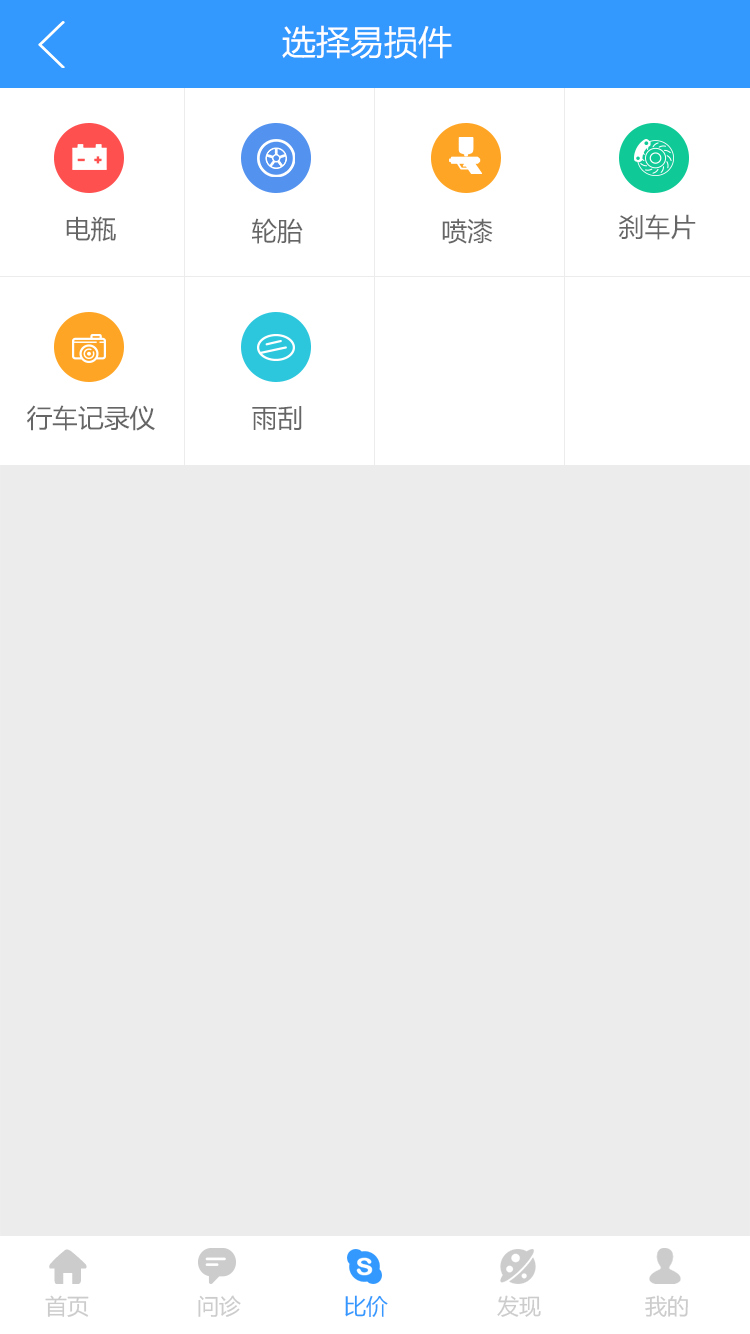
<style>
.page{position:relative;width:750px;height:1334px;background:#ececec}
.page>*{position:absolute;margin:0}
.t1{font:34px "MicrosoftYaHei";color:#ffffff}
.t2{font:25.7px "MicrosoftYaHei";color:#666666}
.t3{font:22px "MicrosoftYaHei";color:#cccccc}
.t4{font:22px "MicrosoftYaHei";color:#3399ff}
</style>
<div class="page">
<p class="t1" style="left:282px;top:25px;width:170px;height:34px">选择易损件</p>
<p class="t2" style="left:66px;top:216px;width:50px;height:26px">电瓶</p>
<p class="t2" style="left:252px;top:218px;width:51px;height:26px">轮胎</p>
<p class="t2" style="left:442px;top:218px;width:51px;height:26px">喷漆</p>
<p class="t2" style="left:618px;top:214px;width:78px;height:26px">刹车片</p>
<p class="t2" style="left:27px;top:405px;width:128px;height:26px">行车记录仪</p>
<p class="t2" style="left:252px;top:406px;width:50px;height:24px">雨刮</p>
<p class="t3" style="left:45px;top:1295px;width:44px;height:22px">首页</p>
<p class="t3" style="left:198px;top:1295px;width:43px;height:22px">问诊</p>
<p class="t4" style="left:345px;top:1295px;width:43px;height:22px">比价</p>
<p class="t3" style="left:497px;top:1295px;width:44px;height:22px">发现</p>
<p class="t3" style="left:645px;top:1295px;width:43px;height:22px">我的</p>
</div>
